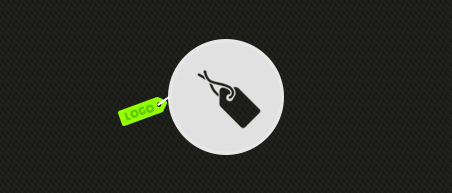
<style>
.page{position:relative;width:452px;height:193px;background:#22231e}
.page>*{position:absolute;margin:0}
.t1{font:12.9px "SoupofJustice";color:#000000}
</style>
<div class="page">
<p class="t1" style="left:124px;top:104px;width:30px;height:17px;rotate:-18deg">Logo</p>
</div>
